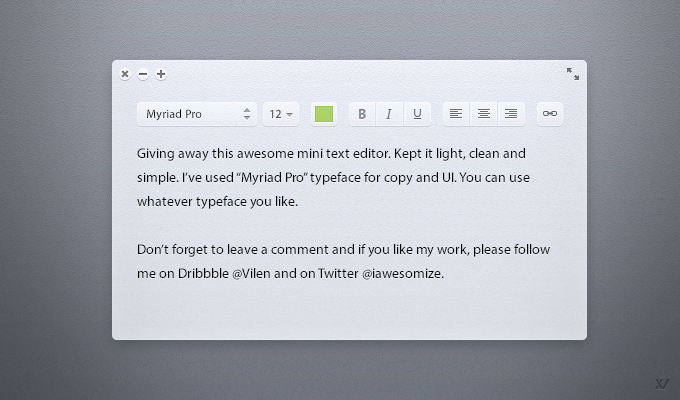
<style>
.page{position:relative;width:680px;height:400px}
.page>*{position:absolute;margin:0}
.t1{font:12px "MyriadPro-Regular";color:#000000}
.t2{font:12px "MyriadPro-Regular";color:#5f6163}
.t3{font:14px/24px "MyriadPro-Regular";color:#000000}
</style>
<div class="page">
<p class="t1" style="left:147px;top:109px;width:55px;height:12px">Myriad Pro</p>
<p class="t2" style="left:270px;top:109px;width:11px;height:9px">12</p>
<p class="t3" style="left:137px;top:148px;width:413px;height:132px">Giving away this awesome mini text editor. Kept it light, clean and simple. I’ve used “Myriad Pro” typeface for copy and UI. You can use whatever typeface you like.<br><br>Don’t forget to leave a comment and if you like my work, please follow me on Dribbble @Vilen and on Twitter @iawesomize.</p>
</div>
